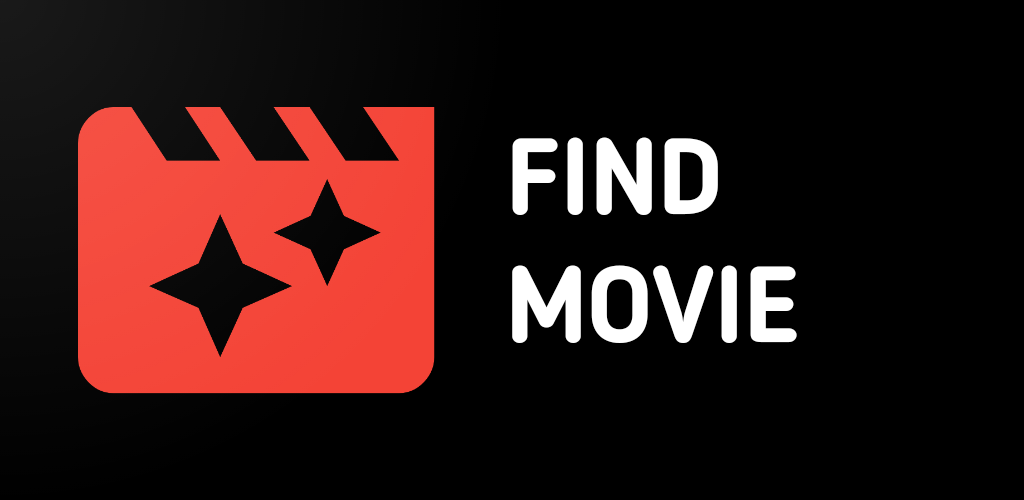
<style>
.page{position:relative;width:1024px;height:500px;background:#000000}
.page>*{position:absolute;margin:0}
.t1{font:107px "BloggerSans-Bold";color:#ffffff}
</style>
<div class="page">
<p class="t1" style="left:512px;top:137px;width:285px;height:206px">FIND <br>MOVIE</p>
</div>
